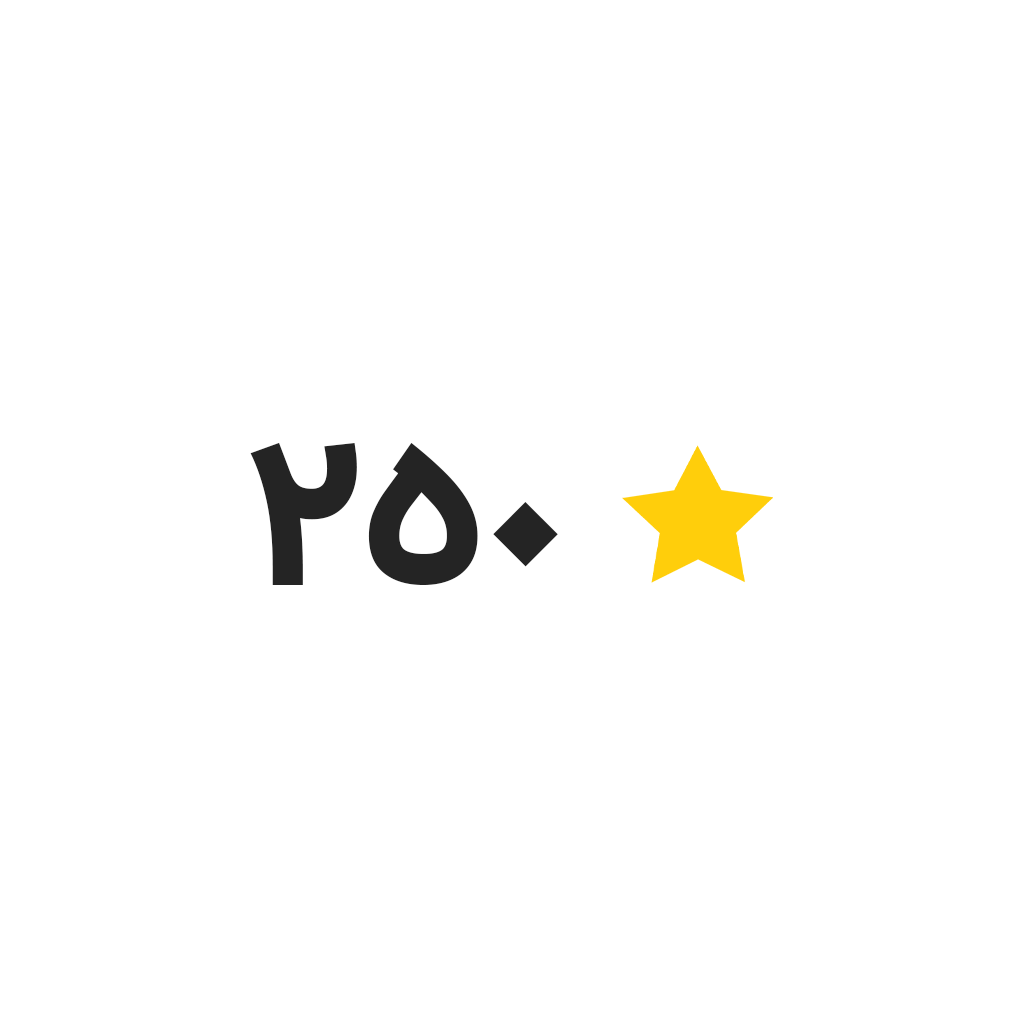
<style>
.page{position:relative;width:1024px;height:1024px;background:#ffffff}
.page>*{position:absolute;margin:0}
.t1{font:213.3px "Vazir-Black";color:#242424}
</style>
<div class="page">
<p class="t1" style="left:250px;top:442px;width:308px;height:143px">250</p>
</div>
